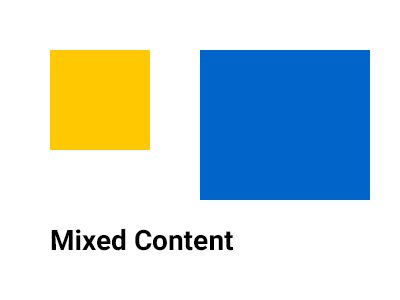
<style>
.page{position:relative;width:400px;height:300px;background:#ffffff}
.page>*{position:absolute;margin:0}
.t1{font:28px "Roboto-Bold";color:#000000}
</style>
<div class="page">
<p class="t1" style="left:51px;top:229px;width:182px;height:22px">Mixed Content</p>
</div>
